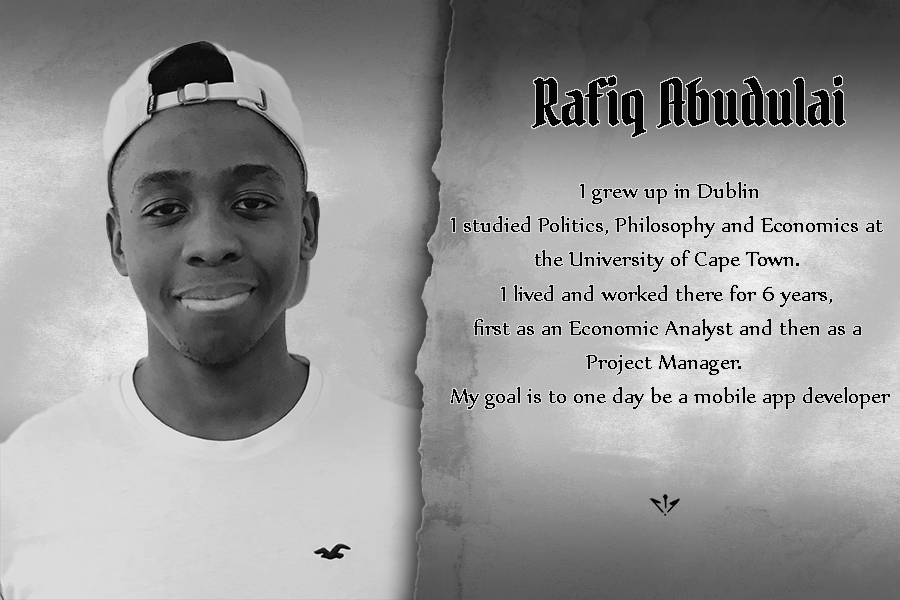
<style>
.page{position:relative;width:900px;height:600px}
.page>*{position:absolute;margin:0}
.t1{font:62.5px "PirataOne-Regular";color:#030405}
.t2{font:25px "Nyala-Regular";color:#030405}
</style>
<div class="page">
<p class="t1" style="left:532px;top:76px;width:313px;height:61px">Rafiq Abudulai</p>
<p class="t2" style="left:451px;top:182px;width:439px;height:227px;text-align:center">I grew up in Dublin<br>I studied Politics, Philosophy and Economics at <br>the University of Cape Town. <br>I lived and worked there for 6 years, <br>first as an Economic Analyst and then as a <br>Project Manager.  <br>My goal is to one day be a mobile app developer</p>
</div>
